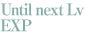
<style>
.page{position:relative;width:85px;height:33px;background:#ffffff}
.page>*{position:absolute;margin:0}
.t1{font:16px/16px "RyuminPro-ExBold";letter-spacing:-0.08em;color:#83ada4}
</style>
<div class="page">
<p class="t1" style="left:0px;top:3px;width:84px;height:29px">Until next Lv<br>EXP</p>
</div>
